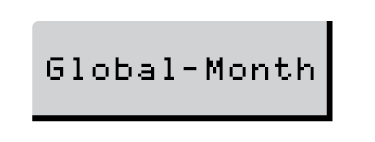
<style>
.page{position:relative;width:375px;height:142px;background:#d1d2d4}
.page>*{position:absolute;margin:0}
.t1{font:26px "Mono0756";color:#000000}
</style>
<div class="page">
<p class="t1" style="left:47px;top:57px;width:267px;height:23px">Global-Month</p>
</div>
